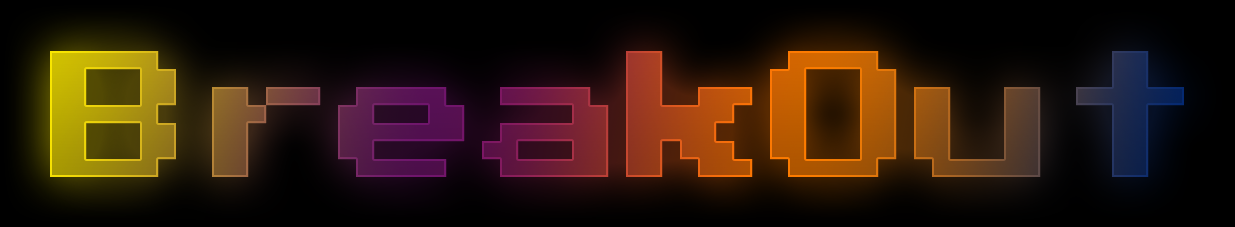
<style>
.page{position:relative;width:1235px;height:227px}
.page>*{position:absolute;margin:0}
.t1{font:144px "PressStart2P"}
</style>
<div class="page">
<p class="t1" style="left:50px;top:51px;width:1134px;height:126px">BreakOut</p>
<p class="t1" style="left:50px;top:51px;width:1134px;height:126px">BreakOut</p>
</div>
